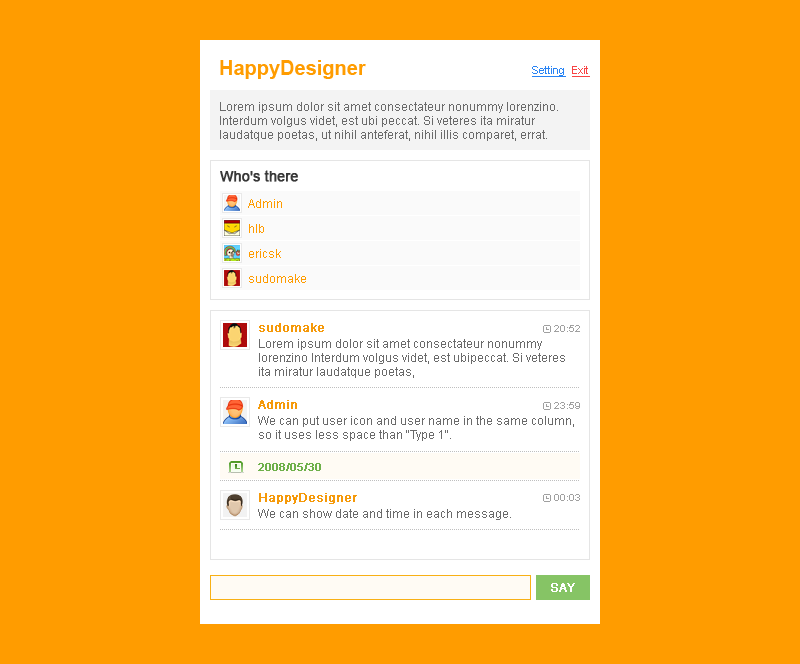
<style>
.page{position:relative;width:800px;height:664px;background:#ff9c00}
.page>*{position:absolute;margin:0}
.t1{font:20px "Arial-BoldMT";color:#ff9c00}
.t2{font:11px "ArialMT";color:#2883f4;text-decoration:underline}
.t3{font:11px "ArialMT";color:#f84343;text-decoration:underline}
.t4{font:12px/14px "ArialMT";color:#6a6a6a}
.t5{font:14px "ArialMT";color:#383838;font-weight:bold}
.t6{font:12px "ArialMT";color:#ff9c00}
.t7{font:12px "ArialMT";color:#f59909;font-weight:bold}
.t8{font:10px "ArialMT";color:#a0a0a0}
.t9{font:12px "ArialMT";color:#6a6a6a}
.t10{font:11px "ArialMT";color:#6eb04b;font-weight:bold}
.t11{font:12px "ArialMT";color:#ffffff;text-transform:uppercase;font-weight:bold}
</style>
<div class="page">
<p class="t1" style="left:220px;top:60px;width:146px;height:19px">HappyDesigner</p>
<p class="t2" style="left:532px;top:66px;width:34px;height:11px">Setting</p>
<p class="t3" style="left:572px;top:66px;width:18px;height:11px">Exit</p>
<p class="t4" style="left:220px;top:102px;width:338px;height:39px">Lorem ipsum dolor sit amet consectateur nonummy lorenzino. <br>Interdum volgus videt, est ubi peccat. Si veteres ita miratur <br>laudatque poetas, ut nihil anteferat, nihil illis comparet, errat.</p>
<p class="t5" style="left:220px;top:170px;width:78px;height:12px">Who's there</p>
<p class="t6" style="left:248px;top:199px;width:34px;height:9px">Admin</p>
<p class="t6" style="left:249px;top:224px;width:15px;height:9px">hlb</p>
<p class="t6" style="left:249px;top:249px;width:32px;height:9px">ericsk</p>
<p class="t6" style="left:249px;top:274px;width:57px;height:9px">sudomake</p>
<p class="t7" style="left:259px;top:323px;width:65px;height:9px">sudomake</p>
<p class="t8" style="left:554px;top:325px;width:26px;height:7px">20:52</p>
<p class="t4" style="left:259px;top:339px;width:306px;height:39px">Lorem ipsum dolor sit amet consectateur nonummy <br>lorenzino Interdum volgus videt, est ubipeccat. Si veteres <br>ita miratur laudatque poetas,</p>
<p class="t7" style="left:258px;top:400px;width:39px;height:9px">Admin</p>
<p class="t8" style="left:554px;top:402px;width:26px;height:7px">23:59</p>
<p class="t9" style="left:258px;top:416px;width:316px;height:25px">We can put user icon and user name in the same column, <br>so it uses less space than "Type 1".</p>
<p class="t10" style="left:258px;top:463px;width:63px;height:8px">2008/05/30</p>
<p class="t7" style="left:259px;top:493px;width:98px;height:11px">HappyDesigner</p>
<p class="t8" style="left:554px;top:494px;width:26px;height:7px">00:03</p>
<p class="t9" style="left:258px;top:509px;width:253px;height:11px">We can show date and time in each message.</p>
<p class="t11" style="left:551px;top:583px;width:24px;height:9px">say</p>
</div>
